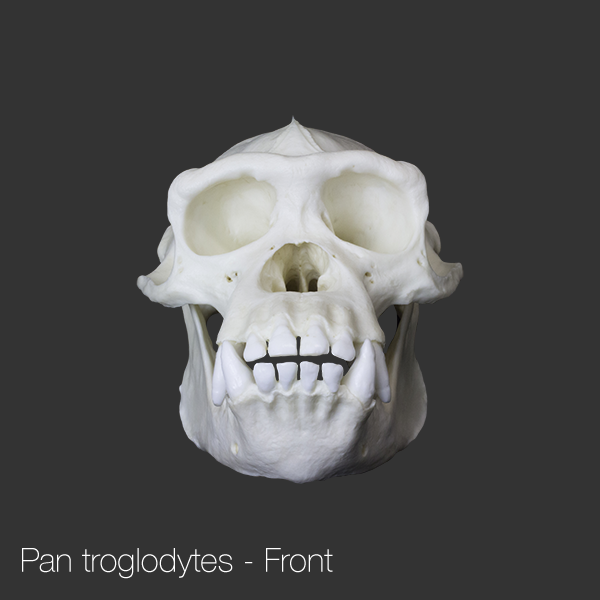
<style>
.page{position:relative;width:600px;height:600px;background:#333333}
.page>*{position:absolute;margin:0}
.t1{font:33.3px "HelveticaNeue-Thin";color:#ffffff}
</style>
<div class="page">
<p class="t1" style="left:22px;top:548px;width:311px;height:31px">Pan troglodytes - Front</p>
</div>
